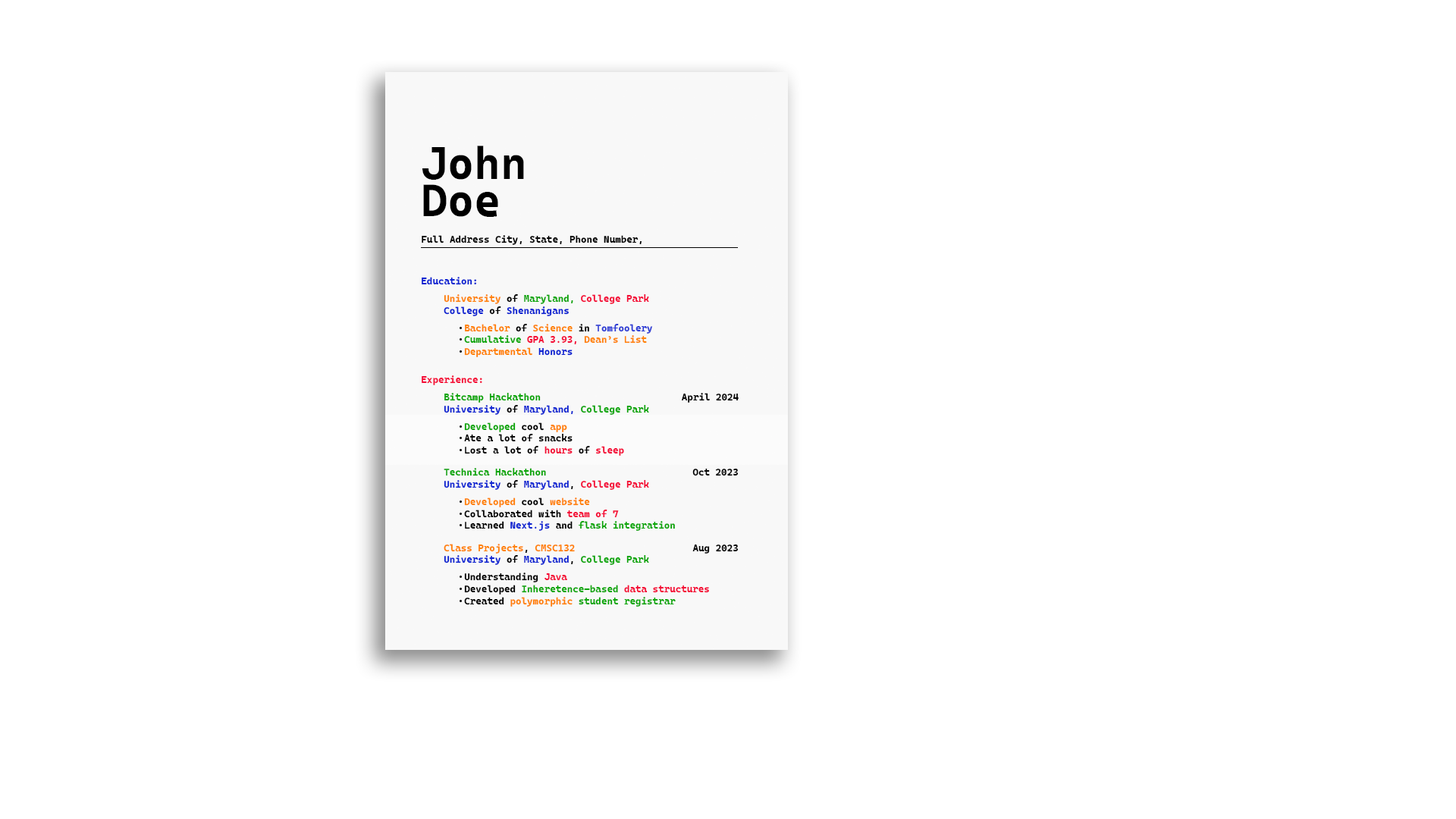
<style>
.page{position:relative;width:1456px;height:819px;background:#ffffff}
.page>*{position:absolute;margin:0}
.t1{font:45.2px/37px "CascadiaMonoRoman-Bold";color:#000000}
.t2{font:9.7px "CascadiaMonoRoman-Bold";color:#000000}
.t3{font:9.7px "CascadiaMonoRoman-Bold";color:#0b22d1}
.t4{font:9.7px/11.9px "CascadiaMonoRoman-Bold";color:#f40b36}
.t5{font:9.7px/11.9px "CascadiaMonoRoman-Bold";color:#ff8207}
.t6{font:9.7px/11.9px "CascadiaMonoRoman-Bold";color:#000000}
.t7{font:9.7px/11.9px "CascadiaMonoRoman-Bold";color:#0aa606}
.t8{font:9.7px/11.9px "CascadiaMonoRoman-Bold";color:#0b22d1}
.t9{font:9.7px/11.9px "CascadiaMonoRoman-Bold";color:#2d3cd4}
.t10{font:9.7px "CascadiaMonoRoman-Bold";color:#f40b36}
</style>
<div class="page">
<p class="t1" style="left:422px;top:146px;width:102px;height:71px">John<br>Doe</p>
<p class="t2" style="left:422px;top:235px;width:220px;height:10px">Full Address City, State, Phone Number, Email</p>
<p class="t3" style="left:422px;top:277px;width:55px;height:8px">Education:</p>
<p class="t4" style="left:444px;top:294px;width:205px;height:22px"><span class="t5">University</span><span class="t6"> of</span><span class="t7"> Maryland,</span> College Park<br><span class="t8">College </span><span class="t6">of</span><span class="t8"> Shenanigans</span></p>
<p class="t5" style="left:464px;top:324px;width:189px;height:33px">Bachelor <span class="t6">of</span> Science <span class="t6">in </span><span class="t9">Tomfoolery<br></span><span class="t7">Cumulative </span><span class="t4">GPA 3.93, </span>Dean’s List<br>Departmental <span class="t8">Honors</span></p>
<p class="t10" style="left:422px;top:375px;width:60px;height:10px">Experience:</p>
<p class="t7" style="left:444px;top:393px;width:205px;height:22px">Bitcamp Hackathon<br><span class="t8">University </span><span class="t6">of</span><span class="t8"> Maryland, </span>College Park</p>
<p class="t2" style="left:682px;top:393px;width:57px;height:10px">April 2024</p>
<p class="t6" style="left:464px;top:422px;width:160px;height:34px"><span class="t7">Developed</span> cool <span class="t5">app<br></span>Ate a lot of snacks<br>Lost a lot of <span class="t4">hours</span> of <span class="t4">sleep</span></p>
<p class="t7" style="left:444px;top:468px;width:205px;height:22px">Technica Hackathon<br><span class="t8">University</span><span class="t6"> of </span><span class="t8">Maryland</span><span class="t6">, </span><span class="t4">College Park</span></p>
<p class="t2" style="left:692px;top:469px;width:47px;height:7px">Oct 2023</p>
<p class="t6" style="left:464px;top:497px;width:211px;height:34px"><span class="t5">Developed</span> cool <span class="t5">website<br></span>Collaborated with <span class="t4">team of 7<br></span>Learned <span class="t8">Next.js</span> and <span class="t7">flask integration</span></p>
<p class="t5" style="left:444px;top:544px;width:205px;height:21px">Class Projects<span class="t6">, </span>CMSC132<br><span class="t8">University </span><span class="t6">of </span><span class="t8">Maryland</span><span class="t6">, </span><span class="t7">College Park</span></p>
<p class="t2" style="left:692px;top:544px;width:47px;height:10px">Aug 2023</p>
<p class="t7" style="left:464px;top:573px;width:245px;height:34px"><span class="t6">Understanding </span><span class="t4">Java<br></span><span class="t6">Developed </span>Inheretence-based <span class="t4">data structures<br></span><span class="t6">Created </span><span class="t5">polymorphic </span>student registrar</p>
</div>
